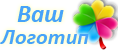
<style>
.page{position:relative;width:118px;height:50px;background:#ffffff}
.page>*{position:absolute;margin:0}
.t1{font:25px "Calibri-BoldItalic";color:#47a3f9}
.t2{font:22.2px "Calibri-BoldItalic";color:#47a3f9}
</style>
<div class="page">
<p class="t1" style="left:17px;top:6px;width:47px;height:16px">Ваш</p>
<p class="t2" style="left:0px;top:30px;width:89px;height:14px">Логотип</p>
</div>
